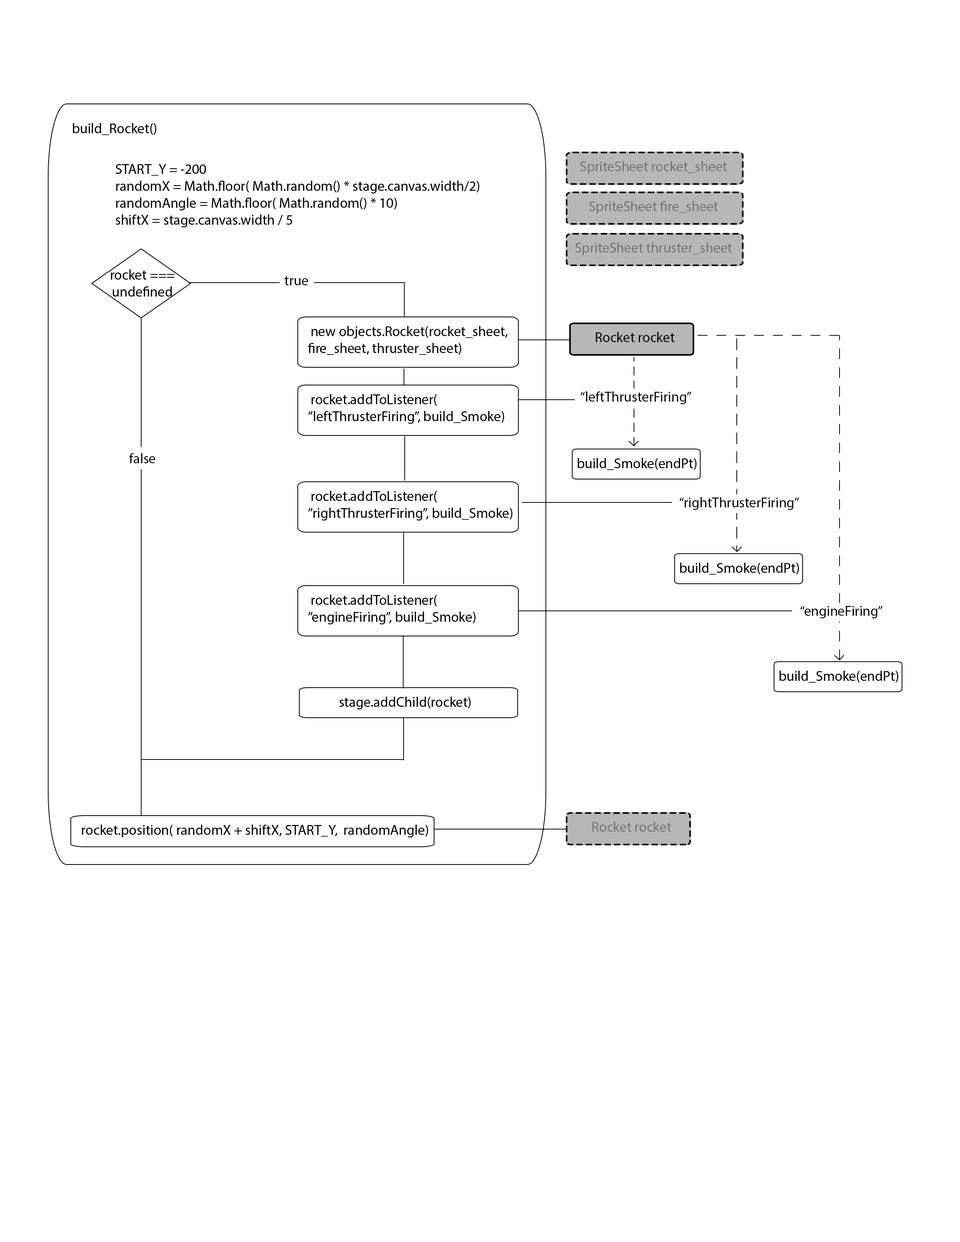
<style>
.page{position:relative;width:960px;height:1242px;background:#ffffff}
.page>*{position:absolute;margin:0}
.t1{font:14.1px "MyriadPro-Regular";color:#000000}
.t2{font:14.1px "MyriadPro-Regular";color:#737373}
</style>
<div class="page">
<p class="t1" style="left:73px;top:123px;width:83px;height:12px">build_Rocket()</p>
<p class="t2" style="left:580px;top:161px;width:147px;height:13px">SpriteSheet rocket_sheet</p>
<p class="t1" style="left:116px;top:164px;width:363px;height:63px">START_Y = -200<br>randomX = Math.floor( Math.random() * stage.canvas.width/2)<br>randomAngle = Math.floor( Math.random() * 10)<br>shiftX = stage.canvas.width / 5</p>
<p class="t2" style="left:589px;top:201px;width:129px;height:13px">SpriteSheet fire_sheet</p>
<p class="t2" style="left:575px;top:242px;width:157px;height:13px">SpriteSheet thruster_sheet</p>
<p class="t1" style="left:111px;top:270px;width:63px;height:27px;text-align:center">rocket ===<br>undefined</p>
<p class="t1" style="left:285px;top:276px;width:23px;height:9px">true</p>
<p class="t1" style="left:308px;top:326px;width:199px;height:29px">new objects.Rocket(rocket_sheet,<br>fire_sheet, thruster_sheet)</p>
<p class="t1" style="left:596px;top:332px;width:79px;height:10px">Rocket rocket</p>
<p class="t1" style="left:308px;top:394px;width:196px;height:30px">rocket.addToListener(<br>”leftThrusterFiring”, build_Smoke)</p>
<p class="t1" style="left:580px;top:391px;width:112px;height:13px">“leftThrusterFiring”</p>
<p class="t1" style="left:129px;top:453px;width:26px;height:10px">false</p>
<p class="t1" style="left:577px;top:458px;width:119px;height:12px">build_Smoke(endPt)</p>
<p class="t1" style="left:308px;top:491px;width:204px;height:30px">rocket.addToListener(<br>”rightThrusterFiring”, build_Smoke)</p>
<p class="t1" style="left:679px;top:497px;width:120px;height:13px">“rightThrusterFiring”</p>
<p class="t1" style="left:680px;top:563px;width:119px;height:12px">build_Smoke(endPt)</p>
<p class="t1" style="left:308px;top:595px;width:167px;height:30px">rocket.addToListener(<br>”engineFiring”, build_Smoke)</p>
<p class="t1" style="left:800px;top:606px;width:83px;height:12px">“engineFiring”</p>
<p class="t1" style="left:779px;top:671px;width:119px;height:12px">build_Smoke(endPt)</p>
<p class="t1" style="left:339px;top:697px;width:132px;height:13px">stage.addChild(rocket)</p>
<p class="t2" style="left:592px;top:822px;width:79px;height:10px">Rocket rocket</p>
<p class="t1" style="left:82px;top:825px;width:346px;height:13px">rocket.position( randomX + shiftX, START_Y,  randomAngle)</p>
</div>
